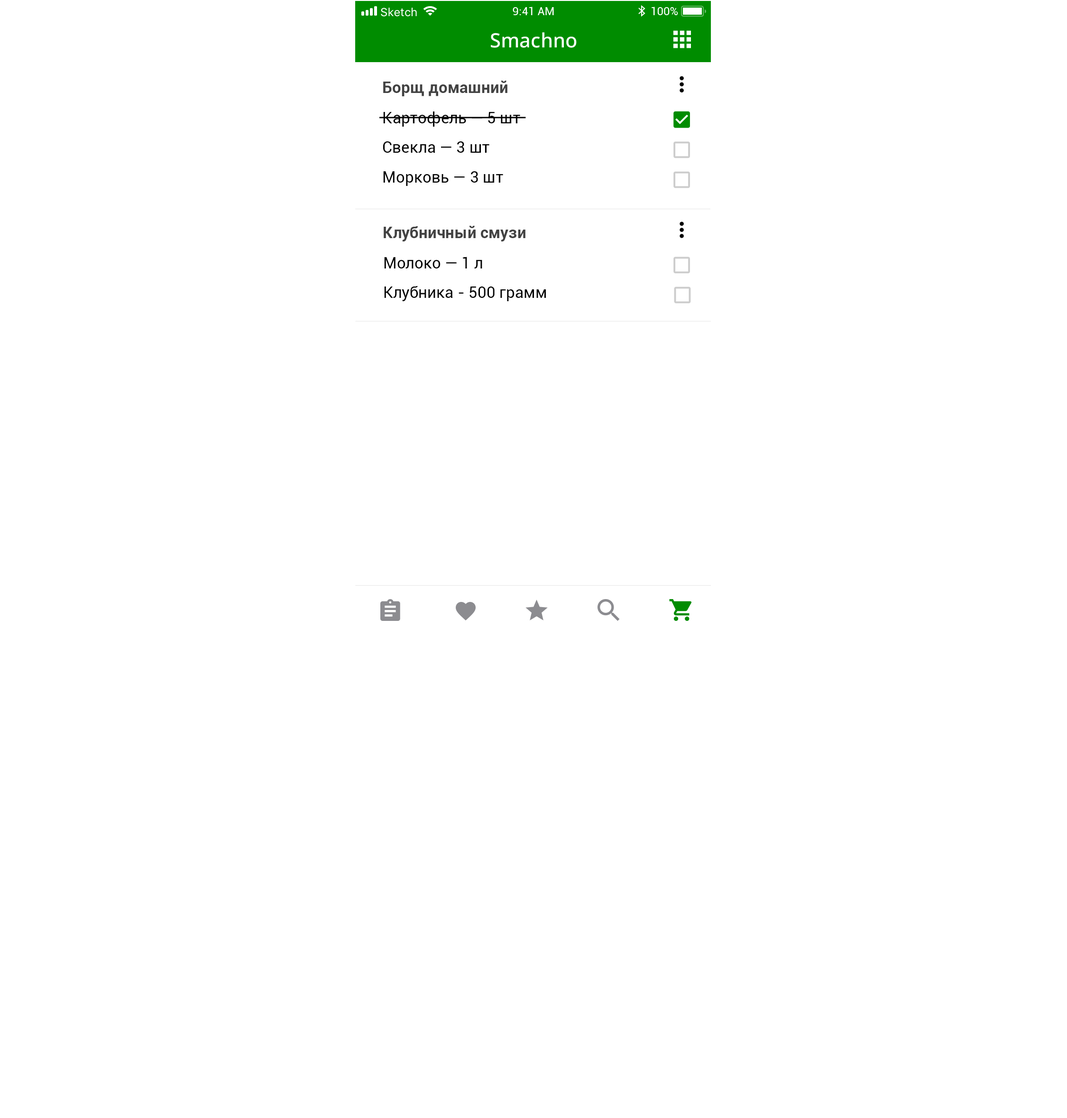
<style>
.page{position:relative;width:1067px;height:1118px;background:#ffffff}
.page>*{position:absolute;margin:0}
.t1{font:19.8px "NotoSans-Medium";color:#ffffff}
.t2{font:15.8px "Roboto-Bold";color:#424242}
.t3{font:15.8px/29.6px "Roboto-Regular";color:#000000}
</style>
<div class="page">
<p class="t1" style="left:491px;top:32px;width:86px;height:16px">Smachno</p>
<p class="t2" style="left:383px;top:81px;width:124px;height:15px">Борщ домашний</p>
<p class="t3" style="left:383px;top:111px;width:137px;height:75px">Картофель — 5 шт<br>Свекла — 3 шт<br>Морковь — 3 шт</p>
<p class="t2" style="left:384px;top:226px;width:141px;height:15px">Клубничный смузи</p>
<p class="t3" style="left:384px;top:257px;width:162px;height:44px">Молоко — 1 л<br>Клубника - 500 грамм</p>
</div>
